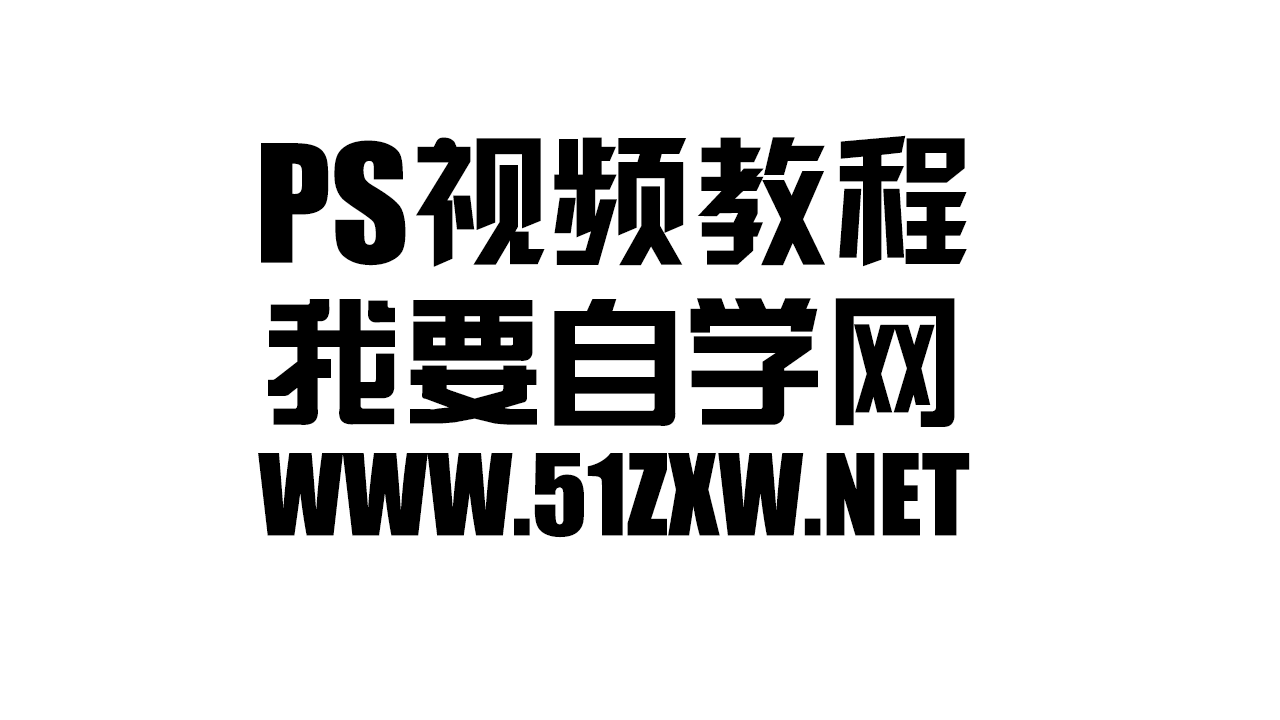
<style>
.page{position:relative;width:1280px;height:720px;background:#ffffff}
.page>*{position:absolute;margin:0}
.t1{font:104px/183px "Impact";color:#000000;text-transform:uppercase}
.t2{font:151px/183px "Impact";color:#000000}
.t3{font:141px/183px "HYk2gj";color:#000000}
.t4{font:141px/151px "BDZYJT--GB1-0";color:#000000;text-transform:uppercase}
</style>
<div class="page">
<p class="t1" style="left:258px;top:135px;width:712px;height:403px;text-align:center"><span class="t2">PS</span><span class="t3">视频教程<br></span><span class="t4">我要自学网<br></span>WWW.51zxw.net</p>
</div>
